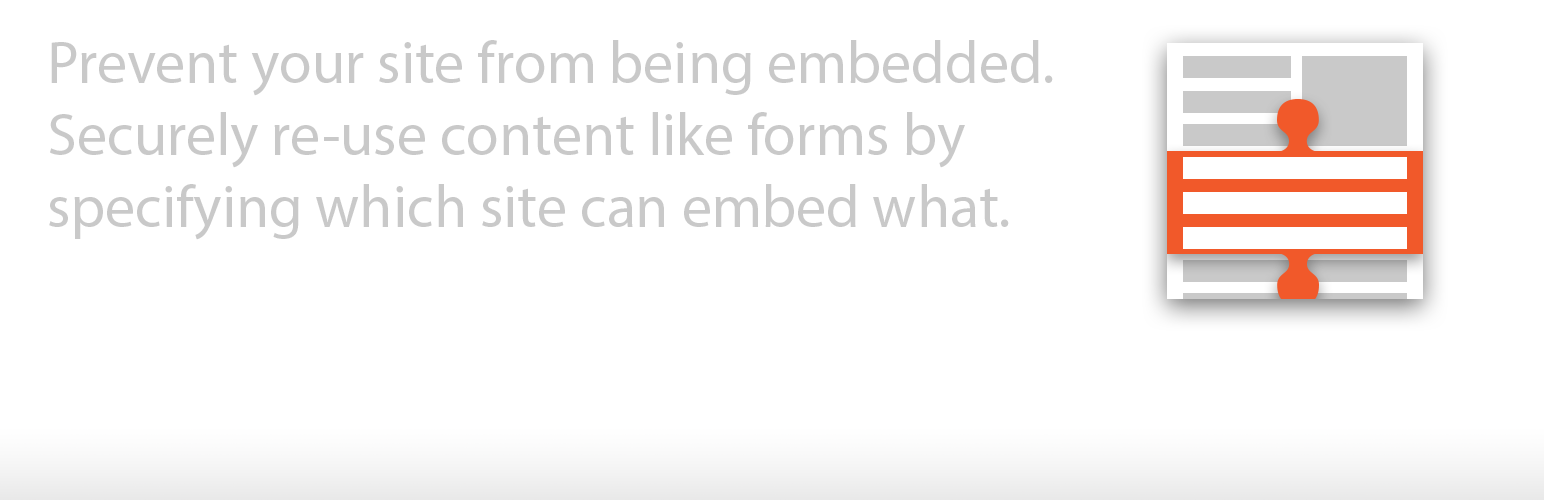
<style>
.page{position:relative;width:1544px;height:500px;background:#ffffff}
.page>*{position:absolute;margin:0}
.t1{font:60px "MyriadPro-Regular";color:#c9c9c9}
</style>
<div class="page">
<p class="t1" style="left:49px;top:40px;width:1004px;height:200px">Prevent your site from being embedded. Securely re-use content like forms by specifying which site can embed what.</p>
</div>
